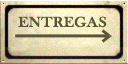
<style>
.page{position:relative;width:128px;height:64px}
.page>*{position:absolute;margin:0}
.t1{font:10.8px "BaskOldFace";letter-spacing:0.005em;color:#58573b;text-transform:uppercase;font-weight:bold;scale:1.11 1}
</style>
<div class="page">
<p class="t1" style="left:18px;top:16px;width:89px;height:12px">ENTREGAS</p>
</div>
